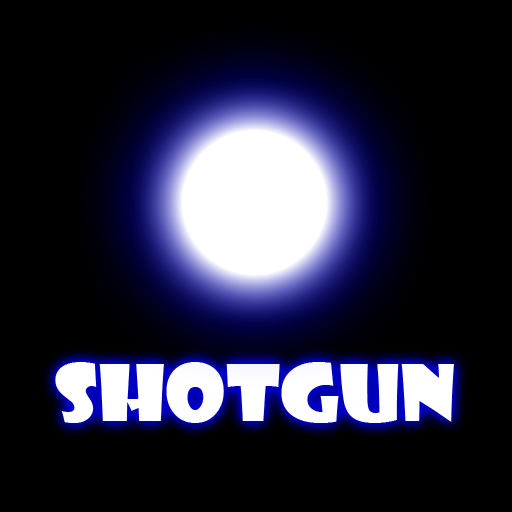
<style>
.page{position:relative;width:512px;height:512px;background:#000000}
.page>*{position:absolute;margin:0}
.t1{font:76.3px "ShowcardGothic-Reg";color:#ffffff;scale:1.14 1}
</style>
<div class="page">
<p class="t1" style="left:55px;top:362px;width:399px;height:61px">SHOTGUN</p>
</div>
